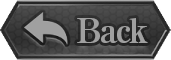
<style>
.page{position:relative;width:171px;height:60px}
.page>*{position:absolute;margin:0}
.t1{font:34px "RyuminPro-ExBold";letter-spacing:-0.08em;color:#a0a0a0}
</style>
<div class="page">
<p class="t1" style="left:77px;top:18px;width:71px;height:25px">Back</p>
</div>
